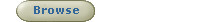
<style>
.page{position:relative;width:200px;height:22px;background:#ffffff}
.page>*{position:absolute;margin:0}
.t1{font:11px "Verdana-Bold";color:#336699}
</style>
<div class="page">
<p class="t1" style="left:34px;top:6px;width:45px;height:8px">Browse</p>
</div>
